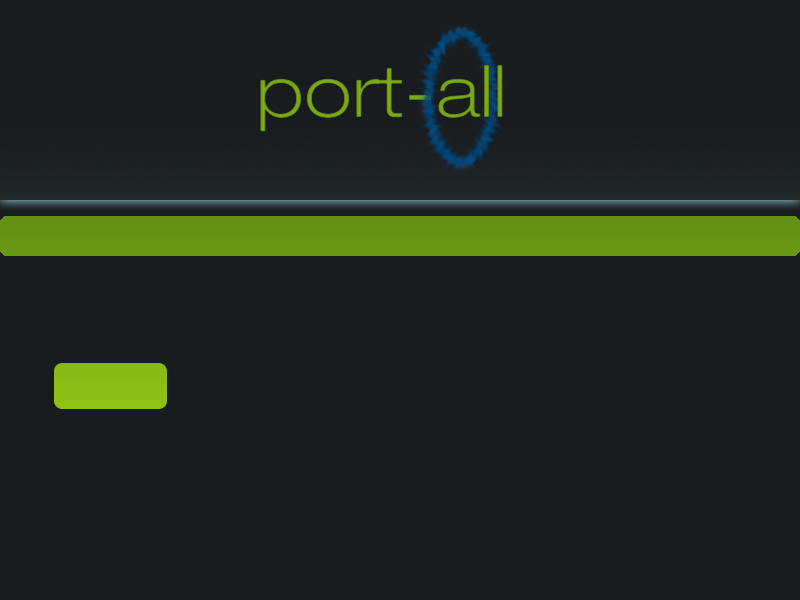
<style>
.page{position:relative;width:800px;height:600px;background:#181c1f}
.page>*{position:absolute;margin:0}
.t1{font:72px "HelveticaNeueLTStd-LtEx";color:#7baa14}
</style>
<div class="page">
<p class="t1" style="left:260px;top:65px;width:243px;height:67px">port-all</p>
</div>
